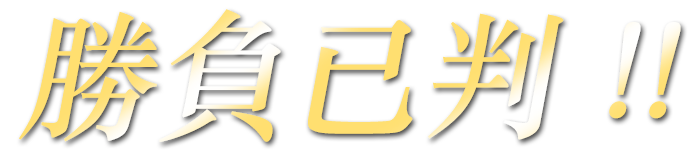
<style>
.page{position:relative;width:700px;height:160px;background:#ffffff}
.page>*{position:absolute;margin:0}
.t1{font:139.3px "STZhongsong";scale:0.96 1}
</style>
<div class="page">
<p class="t1" style="left:19px;top:9px;width:662px;height:133px">勝負已判 !!</p>
</div>
